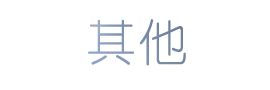
<style>
.page{position:relative;width:270px;height:90px;background:#ffffff}
.page>*{position:absolute;margin:0}
.t1{font:49.5px "YouYuan";letter-spacing:0.05em;color:#7c8eaa}
</style>
<div class="page">
<p class="t1" style="left:88px;top:19px;width:98px;height:47px">其他</p>
</div>
